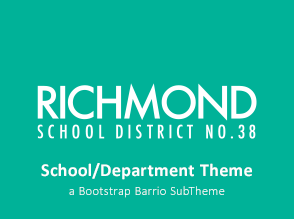
<style>
.page{position:relative;width:294px;height:219px;background:#00b298}
.page>*{position:absolute;margin:0}
.t1{font:12.7px/18.8px "Calibri-Light";letter-spacing:0.035em;color:#fefefe}
.t2{font:18px/17px "Calibri-Bold";letter-spacing:0.035em;color:#fefefe}
</style>
<div class="page">
<p class="t1" style="left:41px;top:163px;width:211px;height:35px;text-align:center"><span class="t2">School/Department Theme<br></span>a Bootstrap Barrio SubTheme</p>
</div>
